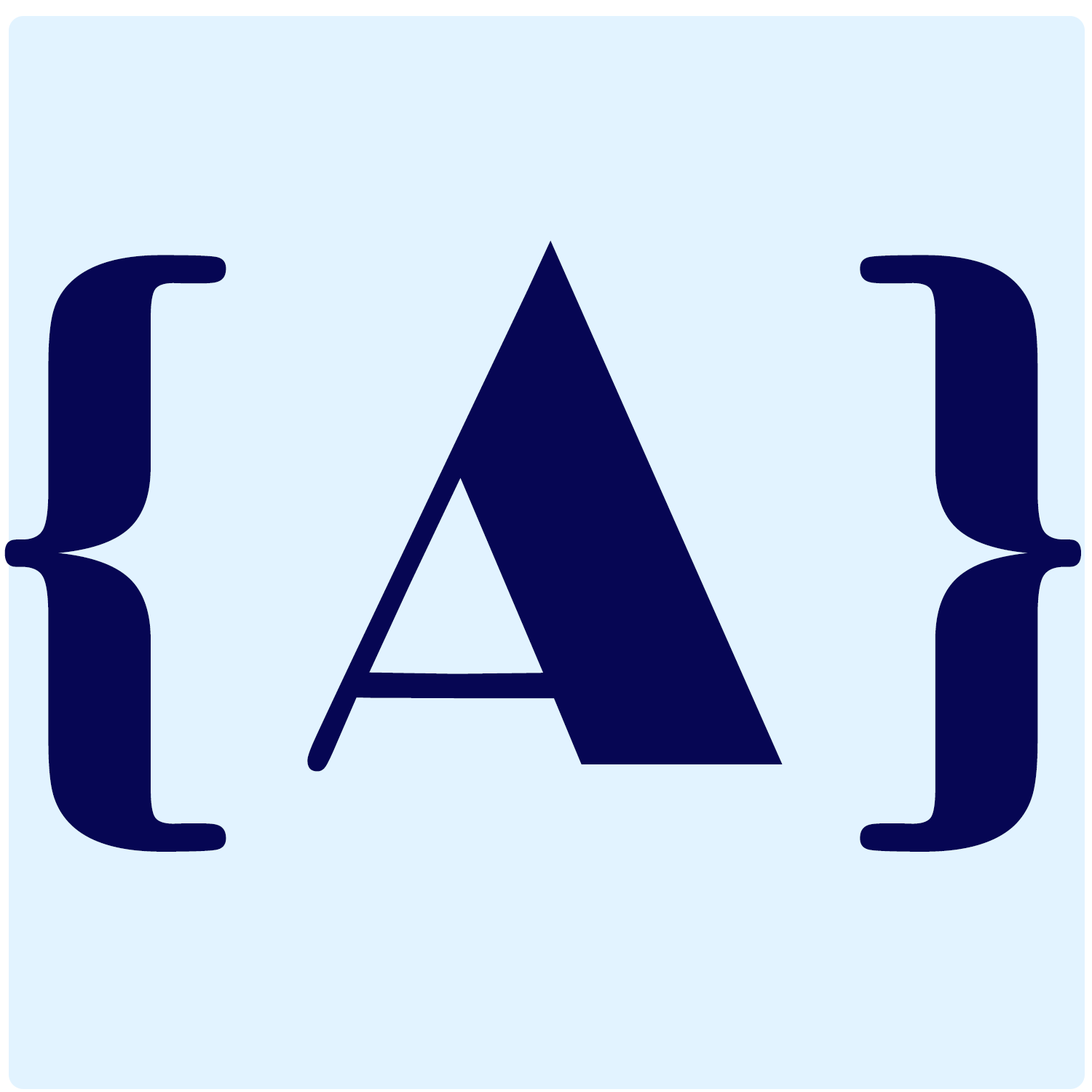
<style>
.page{position:relative;width:1092px;height:1092px;background:#e2f3ff}
.page>*{position:absolute;margin:0}
.t1{font:741.4px "Broadway";letter-spacing:0.01em;color:#060653;scale:0.8 1}
</style>
<div class="page">
<p class="t1" style="left:4px;top:240px;width:1077px;height:612px">{A}</p>
</div>
